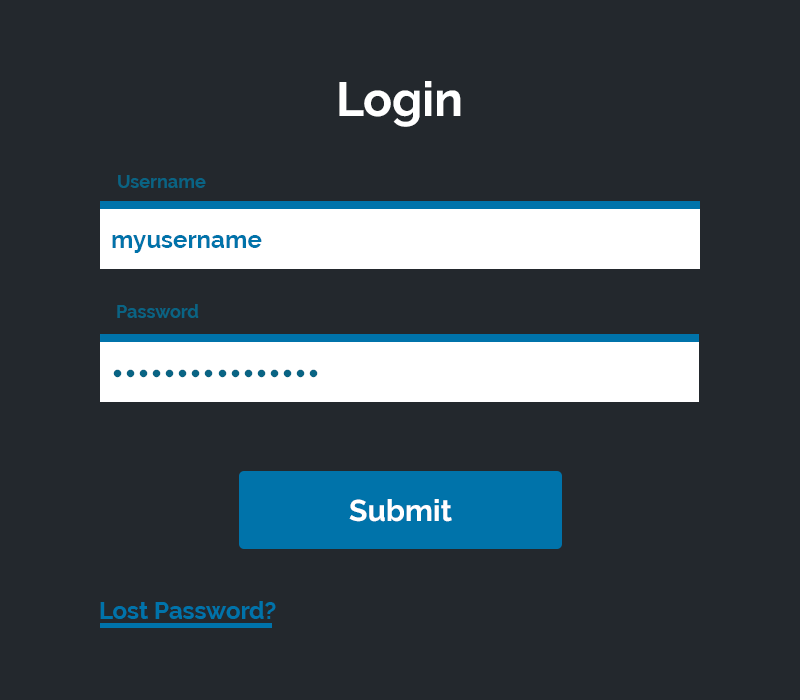
<style>
.page{position:relative;width:800px;height:700px;background:#23282d}
.page>*{position:absolute;margin:0}
.t1{font:48px "Raleway-Bold";color:#ffffff}
.t2{font:18px "Raleway-Bold";color:#096484}
.t3{font:24px "Raleway-Bold";color:#0073aa}
.t4{font:36px "Raleway-Bold";color:#096484}
.t5{font:30px "Raleway-Bold";color:#ffffff}
</style>
<div class="page">
<p class="t1" style="left:339px;top:81px;width:122px;height:46px">Login</p>
<p class="t2" style="left:118px;top:175px;width:88px;height:13px">Username</p>
<p class="t3" style="left:112px;top:235px;width:150px;height:18px">myusername</p>
<p class="t2" style="left:117px;top:304px;width:82px;height:14px">Password</p>
<p class="t4" style="left:113px;top:369px;width:205px;height:9px">••••••••••••••••</p>
<p class="t5" style="left:349px;top:499px;width:103px;height:23px">Submit</p>
<p class="t3" style="left:100px;top:601px;width:176px;height:18px">Lost Password?</p>
</div>
